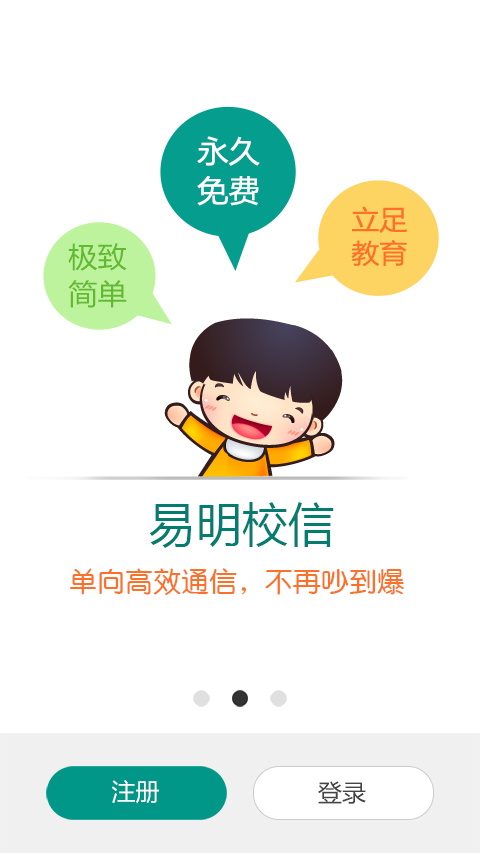
<style>
.page{position:relative;width:480px;height:853px;background:#ffffff}
.page>*{position:absolute;margin:0}
.t1{font:30px/39.3px "MicrosoftYaHei";color:#ffffff;scale:1.04 1}
.t2{font:26.9px/33.2px "MicrosoftYaHei";color:#fb7129;scale:1.04 1}
.t3{font:28.2px/36.9px "MicrosoftYaHei";color:#63b931;scale:1.04 1}
.t4{font:46.6px "MicrosoftYaHei";color:#047c70}
.t5{font:28px "HYe3gj";color:#fb7129}
.t6{font:24px "MicrosoftYaHei";color:#ffffff}
.t7{font:24px "MicrosoftYaHei";color:#444444}
</style>
<div class="page">
<p class="t1" style="left:197px;top:136px;width:63px;height:70px;text-align:center">永久<br>免费</p>
<p class="t2" style="left:351px;top:206px;width:57px;height:61px;text-align:center">立足<br>教育</p>
<p class="t3" style="left:68px;top:243px;width:59px;height:65px;text-align:center">极致<br>简单</p>
<p class="t4" style="left:149px;top:502px;width:185px;height:46px">易明校信</p>
<p class="t5" style="left:70px;top:568px;width:334px;height:27px">单向高效通信，不再吵到爆！</p>
<p class="t6" style="left:112px;top:780px;width:47px;height:24px">注册</p>
<p class="t7" style="left:318px;top:781px;width:48px;height:23px">登录</p>
</div>
